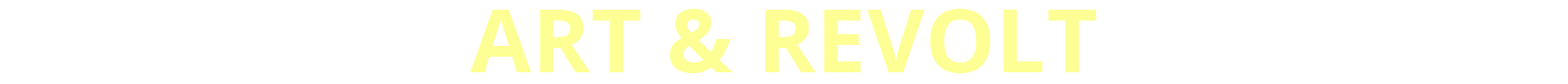
<style>
.page{position:relative;width:1568px;height:84px;background:#ffffff}
.page>*{position:absolute;margin:0}
.t1{font:88.2px "OpenSans-Bold";letter-spacing:0.01em;color:#fdff94;text-transform:uppercase}
</style>
<div class="page">
<p class="t1" style="left:470px;top:9px;width:627px;height:65px">art &amp; revolt</p>
</div>
